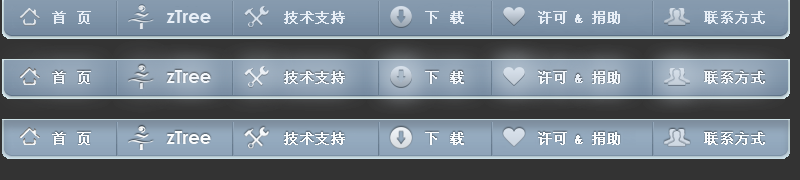
<style>
.page{position:relative;width:800px;height:180px}
.page>*{position:absolute;margin:0}
.t1{font:14px "SimSun";letter-spacing:0.05em;color:#e7eef6;font-weight:bold}
.t2{font:18px "CenturyGothic-Bold";color:#e7eef6}
</style>
<div class="page">
<p class="t1" style="left:52px;top:11px;width:39px;height:13px">首 页</p>
<p class="t2" style="left:166px;top:10px;width:45px;height:13px">zTree</p>
<p class="t1" style="left:284px;top:11px;width:61px;height:13px">技术支持</p>
<p class="t1" style="left:425px;top:11px;width:39px;height:13px">下 载</p>
<p class="t1" style="left:538px;top:11px;width:29px;height:13px">许可</p>
<p class="t1" style="left:575px;top:14px;width:8px;height:9px">&amp;</p>
<p class="t1" style="left:592px;top:11px;width:28px;height:13px">捐助</p>
<p class="t1" style="left:704px;top:11px;width:61px;height:13px">联系方式</p>
<p class="t1" style="left:52px;top:71px;width:39px;height:13px">首 页</p>
<p class="t2" style="left:166px;top:70px;width:45px;height:13px">zTree</p>
<p class="t1" style="left:284px;top:71px;width:61px;height:13px">技术支持</p>
<p class="t1" style="left:425px;top:71px;width:39px;height:13px">下 载</p>
<p class="t1" style="left:538px;top:71px;width:29px;height:13px">许可</p>
<p class="t1" style="left:575px;top:74px;width:8px;height:9px">&amp;</p>
<p class="t1" style="left:592px;top:71px;width:28px;height:13px">捐助</p>
<p class="t1" style="left:704px;top:71px;width:61px;height:13px">联系方式</p>
<p class="t1" style="left:52px;top:132px;width:39px;height:13px">首 页</p>
<p class="t2" style="left:166px;top:131px;width:45px;height:13px">zTree</p>
<p class="t1" style="left:284px;top:132px;width:61px;height:13px">技术支持</p>
<p class="t1" style="left:425px;top:132px;width:39px;height:13px">下 载</p>
<p class="t1" style="left:538px;top:132px;width:29px;height:13px">许可</p>
<p class="t1" style="left:575px;top:135px;width:8px;height:9px">&amp;</p>
<p class="t1" style="left:592px;top:132px;width:28px;height:13px">捐助</p>
<p class="t1" style="left:704px;top:132px;width:61px;height:13px">联系方式</p>
</div>
